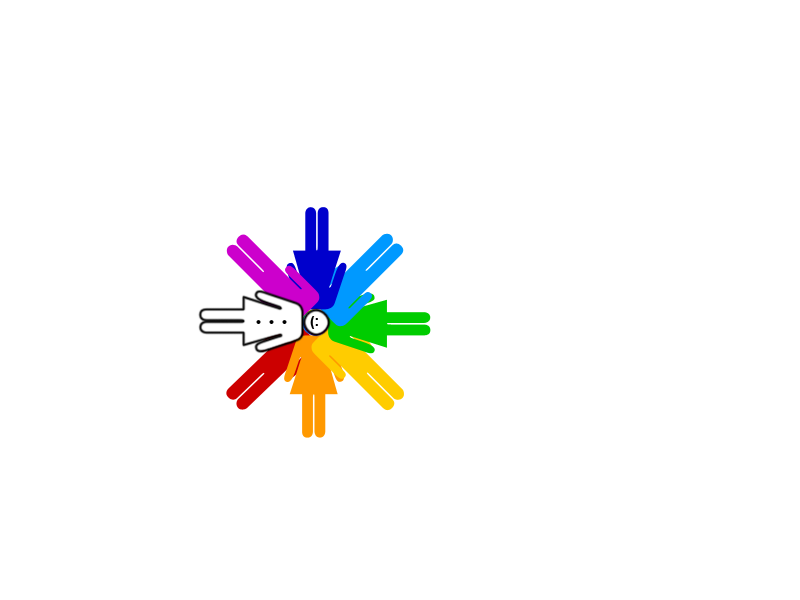
<style>
.page{position:relative;width:800px;height:600px;background:#ffffff}
.page>*{position:absolute;margin:0}
.t1{font:14px "Arial-BoldMT";color:#000000}
</style>
<div class="page">
<p class="t1" style="left:310px;top:316px;width:8px;height:13px">(:</p>
</div>
